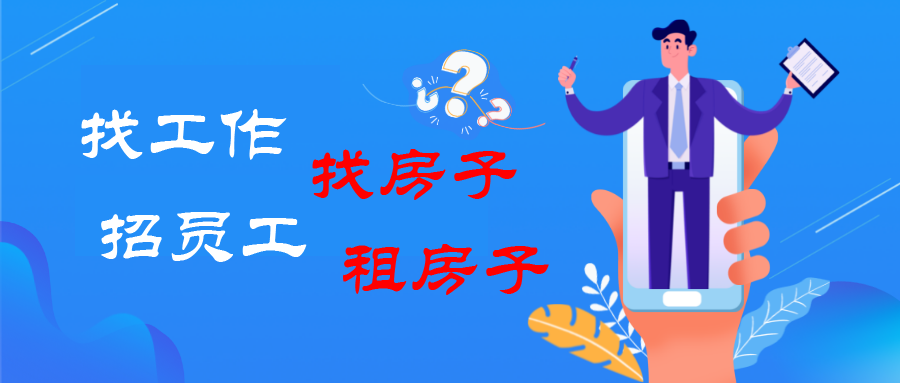
<style>
.page{position:relative;width:900px;height:383px}
.page>*{position:absolute;margin:0}
.t1{font:72px "STLiti";color:#ffffff}
.t2{font:72px "STLiti";color:#ff0000}
</style>
<div class="page">
<p class="t1" style="left:81px;top:109px;width:206px;height:51px">找工作</p>
<p class="t2" style="left:312px;top:149px;width:205px;height:51px">找房子</p>
<p class="t1" style="left:101px;top:212px;width:206px;height:50px">招员工</p>
<p class="t2" style="left:343px;top:244px;width:206px;height:51px">租房子</p>
</div>
